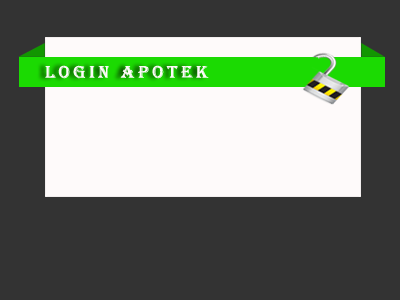
<style>
.page{position:relative;width:400px;height:300px;background:#333333}
.page>*{position:absolute;margin:0}
.t1{font:18px "Algerian";letter-spacing:0.2em;color:#fefafa}
</style>
<div class="page">
<p class="t1" style="left:45px;top:65px;width:164px;height:14px">LOGIN APOTEK</p>
</div>
